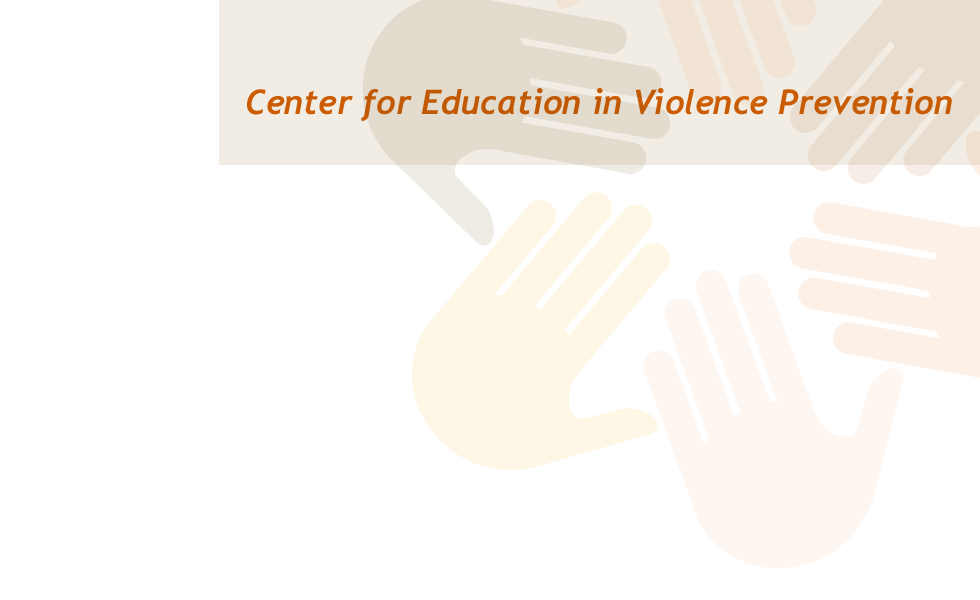
<style>
.page{position:relative;width:980px;height:600px;background:#ffffff}
.page>*{position:absolute;margin:0}
.t1{font:33.9px "Trebuchet-BoldItalic";color:#d76301}
</style>
<div class="page">
<p class="t1" style="left:247px;top:88px;width:705px;height:33px">Center for Education in Violence Prevention</p>
</div>
